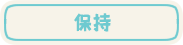
<style>
.page{position:relative;width:183px;height:45px;background:#f7f3e9}
.page>*{position:absolute;margin:0}
.t1{font:12px "shetumodengxiaofangti";color:#6ecad0;font-weight:bold;scale:0.94 1}
</style>
<div class="page">
<p class="t1" style="left:74px;top:13px;width:37px;height:19px">保持</p>
</div>
